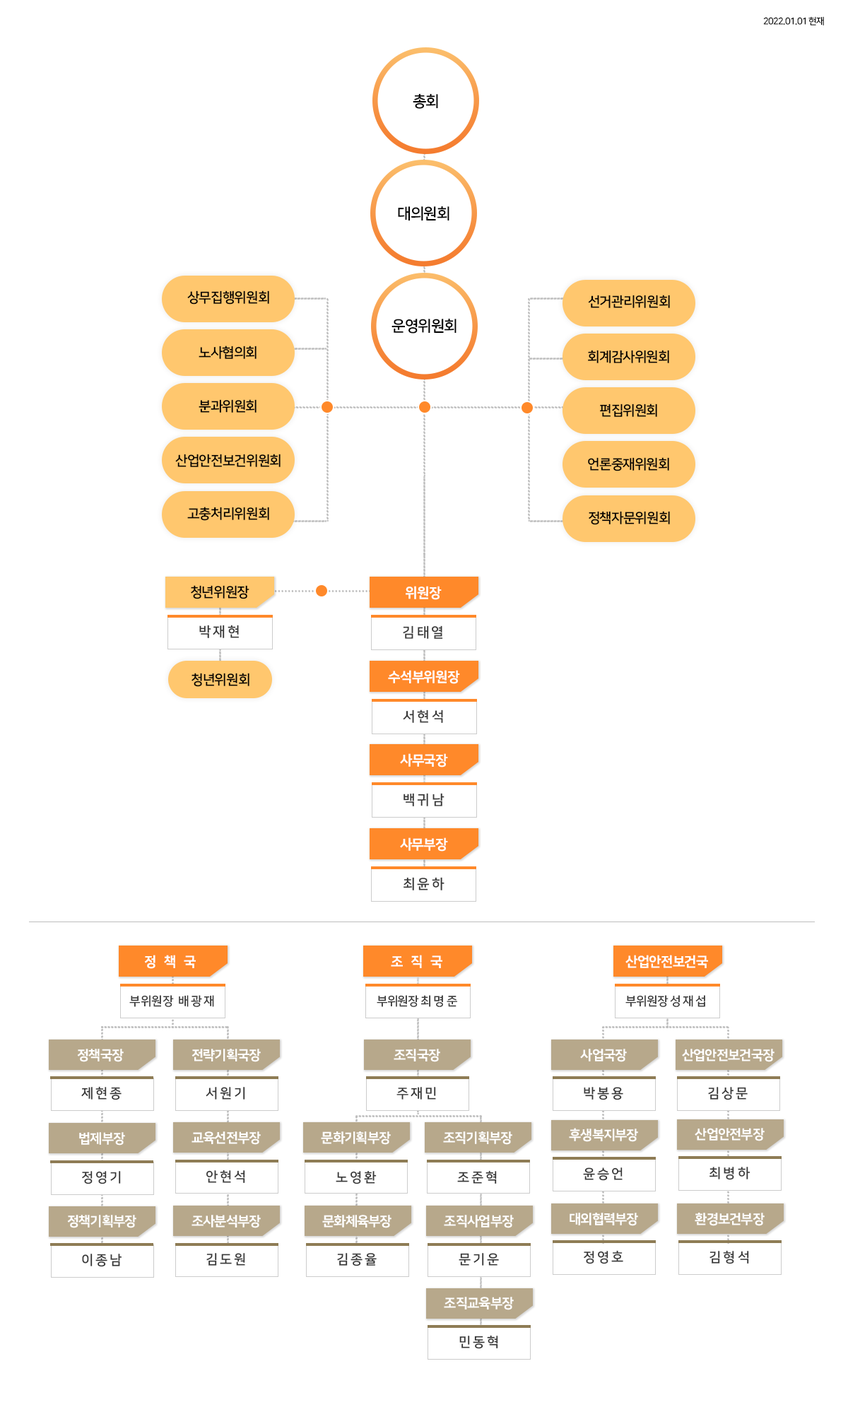
<style>
.page{position:relative;width:848px;height:1407px;background:#ffffff}
.page>*{position:absolute;margin:0}
.t1{font:9.1px "NanumSquareOTFR";letter-spacing:-0.05em;color:#000000}
.t2{font:15.2px "NanumSquareOTFB";letter-spacing:-0.05em;color:#000000}
.t3{font:13.7px "NanumSquareOTFB";letter-spacing:-0.05em;color:#000000}
.t4{font:13.7px "NanumSquareOTFEB";letter-spacing:-0.05em;color:#ffffff}
.t5{font:13.7px "NanumSquareOTFB";letter-spacing:0.15em;color:#373737}
.t6{font:13.7px "NanumSquareOTFEB";letter-spacing:0.53em;color:#ffffff}
.t7{font:12.1px "NanumSquareOTFB";letter-spacing:-0.01em;color:#373737}
.t8{font:12.1px "NanumSquareOTFB";letter-spacing:0.15em;color:#373737}
.t9{font:12.1px "NanumSquareOTFB";letter-spacing:-0.05em;color:#373737}
.t10{font:13.4px "NanumSquareOTFEB";letter-spacing:-0.05em;color:#ffffff}
.t11{font:13.4px "NanumSquareOTFB";letter-spacing:0.15em;color:#373737}
</style>
<div class="page">
<p class="t1" style="left:763px;top:16px;width:61px;height:9px">2022.01.01 현재</p>
<p class="t2" style="left:413px;top:93px;width:25px;height:16px">총회</p>
<p class="t2" style="left:398px;top:206px;width:51px;height:15px">대의원회</p>
<p class="t3" style="left:187px;top:290px;width:82px;height:14px">상무집행위원회</p>
<p class="t3" style="left:588px;top:295px;width:82px;height:13px">선거관리위원회</p>
<p class="t2" style="left:391px;top:318px;width:65px;height:15px">운영위원회</p>
<p class="t3" style="left:199px;top:345px;width:57px;height:14px">노사협의회</p>
<p class="t3" style="left:588px;top:350px;width:81px;height:13px">회계감사위원회</p>
<p class="t3" style="left:199px;top:399px;width:57px;height:14px">분과위원회</p>
<p class="t3" style="left:600px;top:403px;width:57px;height:14px">편집위원회</p>
<p class="t3" style="left:175px;top:454px;width:105px;height:13px">산업안전보건위원회</p>
<p class="t3" style="left:588px;top:457px;width:81px;height:14px">언론중재위원회</p>
<p class="t3" style="left:187px;top:507px;width:82px;height:14px">고충처리위원회</p>
<p class="t3" style="left:588px;top:511px;width:82px;height:14px">정책자문위원회</p>
<p class="t3" style="left:191px;top:585px;width:58px;height:14px">청년위원장</p>
<p class="t4" style="left:406px;top:586px;width:36px;height:14px">위원장</p>
<p class="t5" style="left:199px;top:625px;width:40px;height:13px">박재현</p>
<p class="t5" style="left:403px;top:625px;width:40px;height:14px">김태열</p>
<p class="t3" style="left:191px;top:673px;width:58px;height:14px">청년위원회</p>
<p class="t4" style="left:388px;top:670px;width:72px;height:14px">수석부위원장</p>
<p class="t5" style="left:403px;top:709px;width:40px;height:14px">서현석</p>
<p class="t4" style="left:400px;top:753px;width:48px;height:14px">사무국장</p>
<p class="t5" style="left:403px;top:793px;width:41px;height:13px">백귀남</p>
<p class="t4" style="left:400px;top:837px;width:48px;height:14px">사무부장</p>
<p class="t5" style="left:403px;top:877px;width:41px;height:13px">최윤하</p>
<p class="t6" style="left:144px;top:954px;width:52px;height:15px">정책국</p>
<p class="t6" style="left:391px;top:954px;width:51px;height:14px">조직국</p>
<p class="t4" style="left:625px;top:954px;width:83px;height:14px">산업안전보건국</p>
<p class="t7" style="left:129px;top:995px;width:85px;height:12px">부위원장<span class="t8"> 배광재</span></p>
<p class="t9" style="left:377px;top:995px;width:80px;height:12px">부위원장 <span class="t8">최명준</span></p>
<p class="t9" style="left:625px;top:995px;width:80px;height:12px">부위원장 <span class="t8">성재섭</span></p>
<p class="t10" style="left:77px;top:1048px;width:47px;height:14px">정책국장</p>
<p class="t10" style="left:191px;top:1048px;width:70px;height:14px">전략기획국장</p>
<p class="t10" style="left:394px;top:1048px;width:46px;height:14px">조직국장</p>
<p class="t10" style="left:580px;top:1048px;width:47px;height:14px">사업국장</p>
<p class="t10" style="left:682px;top:1048px;width:92px;height:14px">산업안전보건국장</p>
<p class="t11" style="left:81px;top:1086px;width:41px;height:14px">제현종</p>
<p class="t11" style="left:206px;top:1087px;width:39px;height:12px">서원기</p>
<p class="t11" style="left:396px;top:1087px;width:40px;height:12px">주재민</p>
<p class="t11" style="left:584px;top:1087px;width:39px;height:13px">박봉용</p>
<p class="t11" style="left:708px;top:1087px;width:39px;height:13px">김상문</p>
<p class="t10" style="left:79px;top:1132px;width:46px;height:13px">법제부장</p>
<p class="t10" style="left:191px;top:1131px;width:70px;height:13px">교육선전부장</p>
<p class="t10" style="left:321px;top:1131px;width:70px;height:13px">문화기획부장</p>
<p class="t10" style="left:443px;top:1131px;width:69px;height:13px">조직기획부장</p>
<p class="t10" style="left:569px;top:1128px;width:69px;height:14px">후생복지부장</p>
<p class="t10" style="left:694px;top:1128px;width:70px;height:13px">산업안전부장</p>
<p class="t11" style="left:206px;top:1169px;width:39px;height:14px">안현석</p>
<p class="t11" style="left:457px;top:1170px;width:40px;height:13px">조준혁</p>
<p class="t11" style="left:583px;top:1167px;width:39px;height:14px">윤승언</p>
<p class="t11" style="left:709px;top:1166px;width:41px;height:14px">최병하</p>
<p class="t11" style="left:82px;top:1171px;width:39px;height:13px">정영기</p>
<p class="t11" style="left:336px;top:1171px;width:41px;height:13px">노영환</p>
<p class="t10" style="left:67px;top:1214px;width:69px;height:14px">정책기획부장</p>
<p class="t10" style="left:191px;top:1214px;width:70px;height:14px">조사분석부장</p>
<p class="t10" style="left:322px;top:1214px;width:69px;height:14px">문화체육부장</p>
<p class="t10" style="left:444px;top:1214px;width:70px;height:14px">조직사업부장</p>
<p class="t10" style="left:569px;top:1212px;width:69px;height:14px">대외협력부장</p>
<p class="t10" style="left:694px;top:1212px;width:70px;height:14px">환경보건부장</p>
<p class="t11" style="left:82px;top:1253px;width:40px;height:14px">이종남</p>
<p class="t11" style="left:206px;top:1253px;width:39px;height:12px">김도원</p>
<p class="t11" style="left:337px;top:1253px;width:40px;height:13px">김종율</p>
<p class="t11" style="left:458px;top:1253px;width:41px;height:12px">문기운</p>
<p class="t11" style="left:584px;top:1250px;width:39px;height:14px">정영호</p>
<p class="t11" style="left:709px;top:1250px;width:40px;height:14px">김형석</p>
<p class="t10" style="left:444px;top:1296px;width:70px;height:14px">조직교육부장</p>
<p class="t11" style="left:459px;top:1335px;width:39px;height:14px">민동혁</p>
</div>
